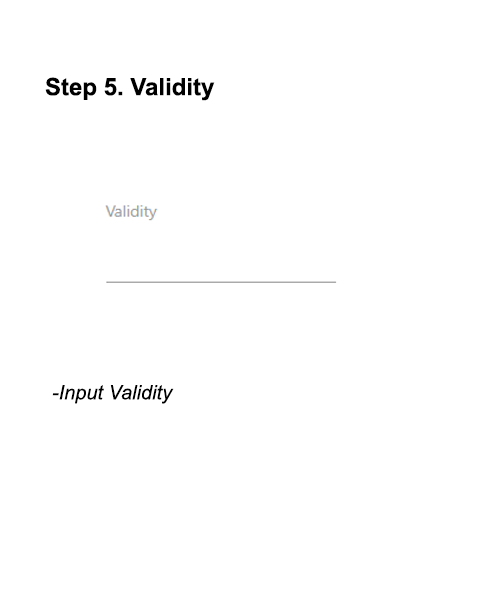
<style>
.page{position:relative;width:500px;height:600px;background:#ffffff}
.page>*{position:absolute;margin:0}
.t1{font:24px "Arial-BoldMT";color:#000000}
.t2{font:20px "Arial-ItalicMT";color:#000000}
</style>
<div class="page">
<p class="t1" style="left:45px;top:77px;width:170px;height:24px">Step 5. Validity</p>
<p class="t2" style="left:52px;top:385px;width:122px;height:19px">-Input Validity</p>
</div>
